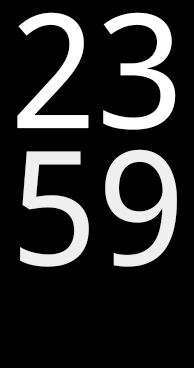
<style>
.page{position:relative;width:194px;height:368px;background:#000000}
.page>*{position:absolute;margin:0}
.t1{font:159.4px "DroidSans";color:#ffffff}
</style>
<div class="page">
<p class="t1" style="left:17px;top:12px;width:159px;height:118px">23</p>
<p class="t1" style="left:20px;top:149px;width:157px;height:118px;opacity:0.9">59</p>
</div>
